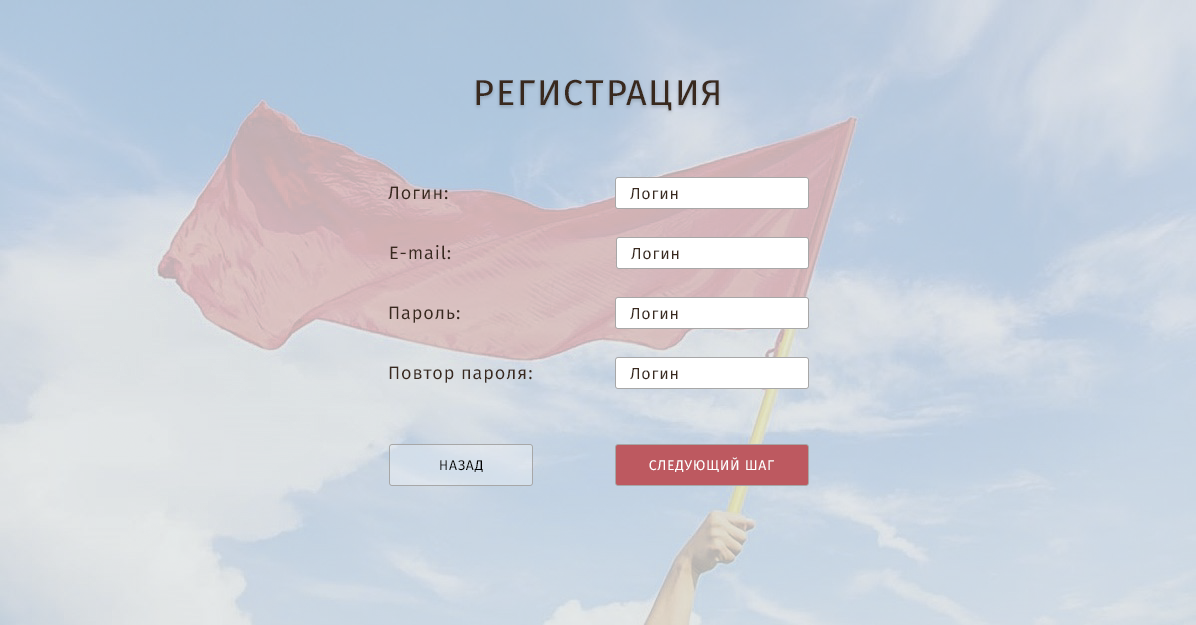
<style>
.page{position:relative;width:1196px;height:625px}
.page>*{position:absolute;margin:0}
.t1{font:36px "FiraSans-Regular";letter-spacing:0.05em;color:#39291e;text-transform:uppercase}
.t2{font:18px "FiraSans-Regular";letter-spacing:0.05em;color:#39291e}
.t3{font:16px "FiraSans-Regular";letter-spacing:0.05em;color:#39291e}
.t4{font:14px "FiraSans-Regular";letter-spacing:0.05em;color:#000000;text-transform:uppercase}
.t5{font:14px "FiraSans-Regular";letter-spacing:0.05em;color:#ffffff;text-transform:uppercase}
</style>
<div class="page">
<p class="t1" style="left:476px;top:79px;width:243px;height:32px">регистрация</p>
<p class="t2" style="left:388px;top:186px;width:60px;height:14px">Логин:</p>
<p class="t3" style="left:630px;top:188px;width:48px;height:12px">Логин</p>
<p class="t2" style="left:390px;top:245px;width:61px;height:15px">E-mail:</p>
<p class="t3" style="left:631px;top:248px;width:48px;height:12px">Логин</p>
<p class="t2" style="left:389px;top:306px;width:71px;height:17px">Пароль:</p>
<p class="t3" style="left:630px;top:308px;width:48px;height:12px">Логин</p>
<p class="t2" style="left:389px;top:366px;width:143px;height:17px">Повтор пароля:</p>
<p class="t3" style="left:630px;top:368px;width:48px;height:12px">Логин</p>
<p class="t4" style="left:440px;top:460px;width:43px;height:12px">назад</p>
<p class="t5" style="left:649px;top:457px;width:125px;height:15px">следующий шаг</p>
</div>
